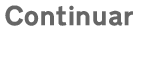
<style>
.page{position:relative;width:143px;height:70px;background:#ffffff}
.page>*{position:absolute;margin:0}
.t1{font:26px "Transport-Heavy-Regular";color:#666666}
</style>
<div class="page">
<p class="t1" style="left:5px;top:5px;width:128px;height:21px">Continuar</p>
</div>
